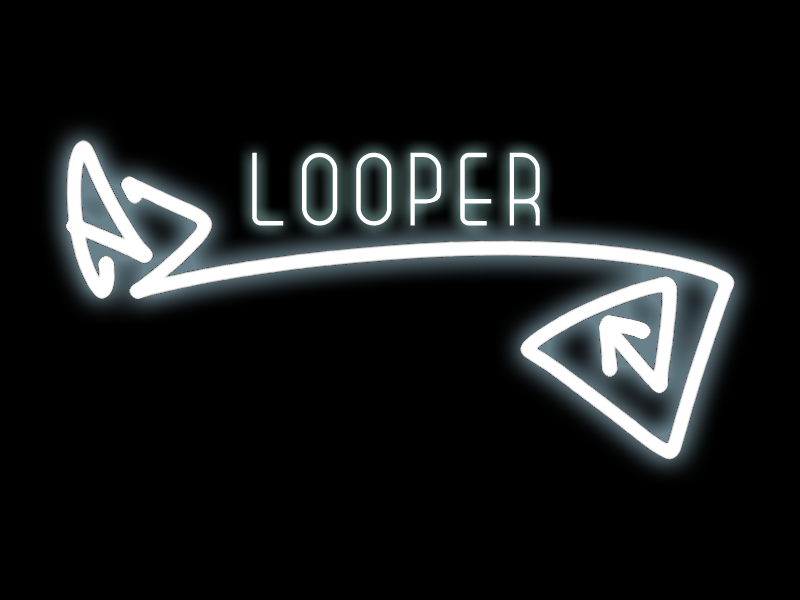
<style>
.page{position:relative;width:800px;height:600px;background:#000000}
.page>*{position:absolute;margin:0}
.t1{font:97px "BeautySchoolDropout";letter-spacing:0.16em;color:#ffffff}
</style>
<div class="page">
<p class="t1" style="left:252px;top:152px;width:288px;height:74px">LOOPER</p>
</div>
